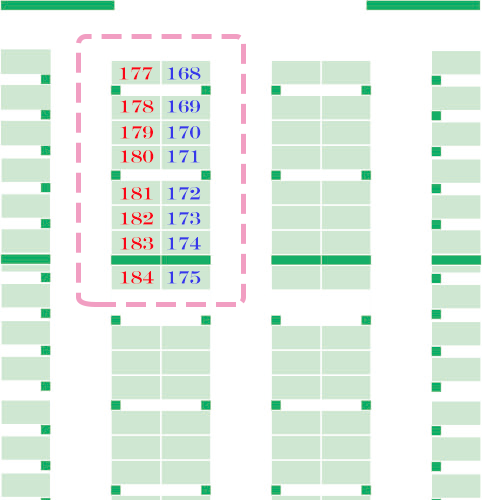
<style>
.page{position:relative;width:482px;height:500px;background:#ffffff}
.page>*{position:absolute;margin:0}
.t1{font:18px "EngraversMT";color:#fa0516}
.t2{font:18px "EngraversMT";color:#3737ea}
</style>
<div class="page">
<p class="t1" style="left:119px;top:67px;width:34px;height:13px">177</p>
<p class="t2" style="left:167px;top:67px;width:34px;height:13px">168</p>
<p class="t1" style="left:120px;top:100px;width:34px;height:13px">178</p>
<p class="t2" style="left:167px;top:100px;width:33px;height:13px">169</p>
<p class="t1" style="left:120px;top:126px;width:33px;height:13px">179</p>
<p class="t2" style="left:167px;top:126px;width:34px;height:13px">170</p>
<p class="t1" style="left:120px;top:150px;width:34px;height:13px">180</p>
<p class="t2" style="left:167px;top:150px;width:33px;height:13px">171</p>
<p class="t1" style="left:120px;top:187px;width:33px;height:13px">181</p>
<p class="t2" style="left:167px;top:187px;width:34px;height:13px">172</p>
<p class="t1" style="left:120px;top:212px;width:34px;height:13px">182</p>
<p class="t2" style="left:167px;top:212px;width:34px;height:13px">173</p>
<p class="t1" style="left:120px;top:237px;width:34px;height:13px">183</p>
<p class="t2" style="left:167px;top:237px;width:34px;height:13px">174</p>
<p class="t1" style="left:120px;top:271px;width:34px;height:13px">184</p>
<p class="t2" style="left:167px;top:271px;width:34px;height:13px">175</p>
</div>
